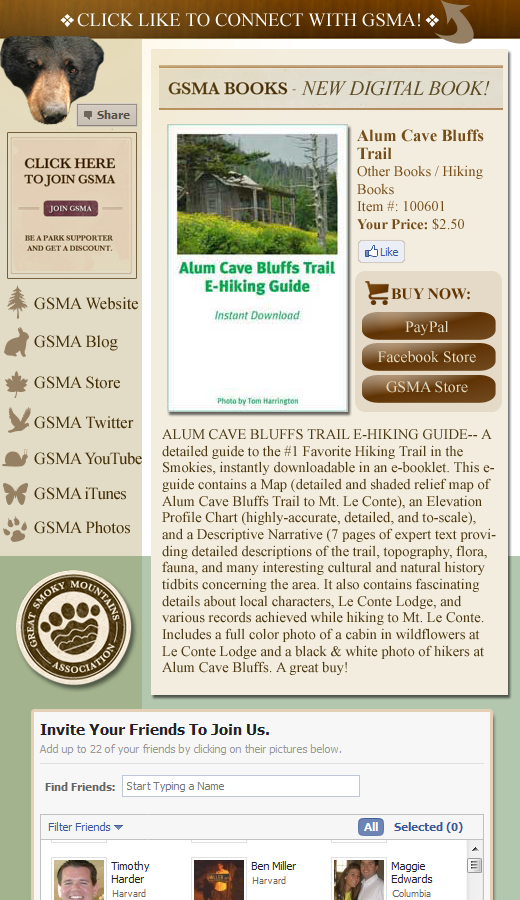
<style>
.page{position:relative;width:520px;height:900px;background:#f3eddf}
.page>*{position:absolute;margin:0}
.t1{font:18.8px "TimesNewRomanPSMT";color:#ffffff}
.t2{font:14.6px/17.5px "TimesNewRomanPSMT";color:#754d18}
.t3{font:16.7px/17.5px "TimesNewRomanPS-BoldMT";color:#754d18}
.t4{font:14.6px/17.5px "TimesNewRomanPS-BoldMT";color:#754d18}
.t5{font:15.8px "TimesNewRomanPS-BoldMT";color:#643604}
.t6{font:16.7px "TimesNewRomanPSMT";color:#442f07}
.t7{font:15.8px "TimesNewRomanPSMT";color:#e2dbc5}
.t8{font:14.6px/16.7px "TimesNewRomanPSMT";color:#4c3811}
.t9{font:16.7px "TimesNewRomanPSMT";letter-spacing:-0.025em;color:#442f07}
</style>
<div class="page">
<p class="t1" style="left:77px;top:13px;width:343px;height:14px">CLICK LIKE TO CONNECT WITH GSMA!</p>
<p class="t2" style="left:357px;top:129px;width:127px;height:101px"><span class="t3">Alum Cave Bluffs Trail<br></span>Other Books / Hiking Books<br>Item #: 100601<br><span class="t4">Your Price:</span> $2.50</p>
<p class="t5" style="left:391px;top:288px;width:79px;height:12px">BUY NOW:</p>
<p class="t6" style="left:34px;top:297px;width:104px;height:13px">GSMA Website</p>
<p class="t7" style="left:405px;top:321px;width:44px;height:15px">PayPal</p>
<p class="t6" style="left:34px;top:335px;width:84px;height:16px">GSMA Blog</p>
<p class="t7" style="left:377px;top:351px;width:99px;height:12px">Facebook Store</p>
<p class="t6" style="left:34px;top:376px;width:86px;height:13px">GSMA Store</p>
<p class="t7" style="left:386px;top:381px;width:82px;height:12px">GSMA Store</p>
<p class="t6" style="left:34px;top:416px;width:100px;height:13px">GSMA Twitter</p>
<p class="t8" style="left:162px;top:429px;width:334px;height:246px">ALUM CAVE BLUFFS TRAIL E-HIKING GUIDE-- A detailed guide to the #1 Favorite Hiking Trail in the Smokies, instantly downloadable in an e-booklet. This e-guide contains a Map (detailed and shaded relief map of Alum Cave Bluffs Trail to Mt. Le Conte), an Elevation Profile Chart (highly-accurate, detailed, and to-scale), and a Descriptive Narrative (7 pages of expert text providing detailed descriptions of the trail, topography, flora, fauna, and many interesting cultural and natural history tidbits concerning the area. It also contains fascinating details about local characters, Le Conte Lodge, and various records achieved while hiking to Mt. Le Conte. Includes a full color photo of a cabin in wildflowers at Le Conte Lodge and a black &amp; white photo of hikers at Alum Cave Bluffs. A great buy!</p>
<p class="t9" style="left:34px;top:452px;width:108px;height:13px"><span class="t6">GSMA </span>YouTube</p>
<p class="t9" style="left:34px;top:487px;width:92px;height:13px"><span class="t6">GSMA </span>iTunes</p>
<p class="t6" style="left:34px;top:521px;width:96px;height:13px">GSMA Photos</p>
</div>
